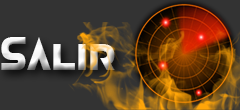
<style>
.page{position:relative;width:240px;height:110px;background:#333333}
.page>*{position:absolute;margin:0}
.t1{font:49.1px "Armwarmer"}
</style>
<div class="page">
<p class="t1" style="left:1px;top:37px;width:114px;height:33px">Salir</p>
</div>
